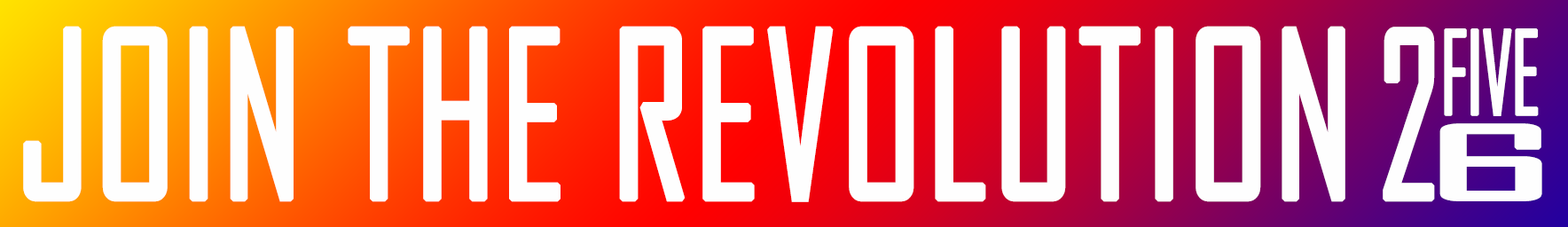
<style>
.page{position:relative;width:1568px;height:227px;background:#fefefe}
.page>*{position:absolute;margin:0}
.t1{font:221.7px "AgencyFB-Reg";color:#fefefe;font-weight:bold;scale:0.82 1}
.t2{font:221.7px "AgencyFB-Reg";color:#fefefe;font-weight:bold;scale:0.69 1}
.t3{font:110.9px "AgencyFB-Reg";letter-spacing:-0.04em;color:#fefefe;font-weight:bold;scale:0.72 1}
.t4{font:95.3px "AgencyFB-Reg";color:#fefefe;font-weight:bold;scale:3.35 1}
</style>
<div class="page">
<p class="t1" style="left:23px;top:26px;width:1322px;height:176px">JOIN THE REVOLUTION</p>
<p class="t2" style="left:1383px;top:27px;width:52px;height:175px">2</p>
<p class="t3" style="left:1444px;top:28px;width:95px;height:88px">FIVE</p>
<p class="t4" style="left:1439px;top:123px;width:103px;height:78px">6</p>
</div>
